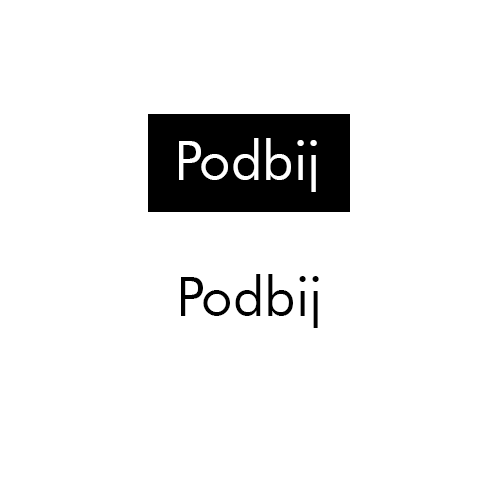
<style>
.page{position:relative;width:500px;height:500px;background:#ffffff}
.page>*{position:absolute;margin:0}
.t1{font:55.2px "FuturaBT-Book";color:#ffffff}
.t2{font:55.2px "FuturaBT-Book";color:#000000}
</style>
<div class="page">
<p class="t1" style="left:179px;top:138px;width:138px;height:54px">Podbij</p>
<p class="t2" style="left:181px;top:274px;width:138px;height:54px">Podbij</p>
</div>
